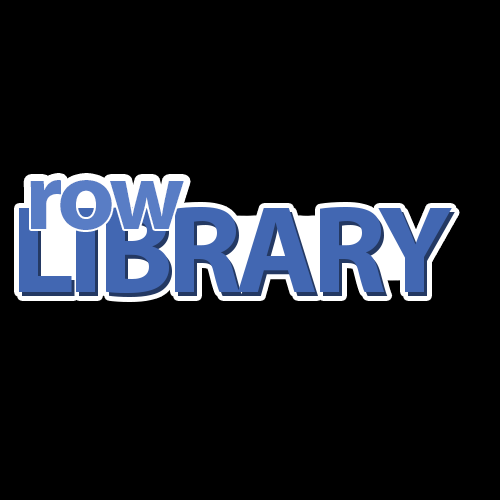
<style>
.page{position:relative;width:500px;height:500px;background:#000000}
.page>*{position:absolute;margin:0}
.t1{font:100px "MyriadPro-Bold";letter-spacing:-0.05em;color:#597dc5}
.t2{font:125px "MyriadPro-Bold";letter-spacing:-0.05em;color:#4267b2}
</style>
<div class="page">
<p class="t1" style="left:30px;top:180px;width:154px;height:50px">row</p>
<p class="t2" style="left:19px;top:206px;width:433px;height:87px">LIBRARY</p>
</div>
